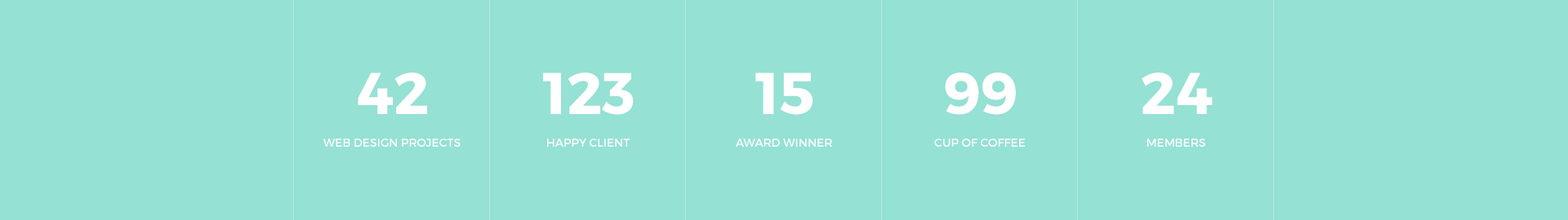
<style>
.page{position:relative;width:1568px;height:220px;background:#95e1d3}
.page>*{position:absolute;margin:0}
.t1{font:58.8px "Montserrat-Bold";color:#ffffff;text-transform:uppercase}
.t2{font:11.4px "Montserrat-Regular";color:#ffffff;text-transform:uppercase}
</style>
<div class="page">
<p class="t1" style="left:358px;top:73px;width:69px;height:41px">42</p>
<p class="t1" style="left:543px;top:73px;width:91px;height:42px">123</p>
<p class="t1" style="left:755px;top:73px;width:58px;height:42px">15</p>
<p class="t1" style="left:945px;top:73px;width:71px;height:42px">99</p>
<p class="t1" style="left:1142px;top:73px;width:71px;height:41px">24</p>
<p class="t2" style="left:323px;top:139px;width:138px;height:8px">Web Design Projects</p>
<p class="t2" style="left:547px;top:139px;width:83px;height:8px">happy client</p>
<p class="t2" style="left:735px;top:139px;width:97px;height:8px">award winner</p>
<p class="t2" style="left:934px;top:139px;width:91px;height:8px">cup of coffee</p>
<p class="t2" style="left:1147px;top:139px;width:58px;height:8px">members</p>
</div>
